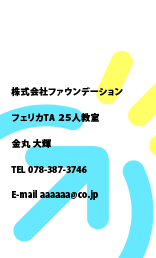
<style>
.page{position:relative;width:156px;height:258px;background:#ffffff}
.page>*{position:absolute;margin:0}
.t1{font:9px "KozGoPro-Heavy";letter-spacing:0.05em;color:#000000}
</style>
<div class="page">
<p class="t1" style="left:11px;top:87px;width:112px;height:10px">株式会社ファウンデーション</p>
<p class="t1" style="left:12px;top:113px;width:88px;height:9px">フェリカTA ２５人教室</p>
<p class="t1" style="left:11px;top:139px;width:40px;height:9px">金丸 大輝</p>
<p class="t1" style="left:11px;top:166px;width:76px;height:7px">TEL 078-387-3746</p>
<p class="t1" style="left:12px;top:190px;width:86px;height:10px">E-mail aaaaaa@co.jp</p>
</div>
